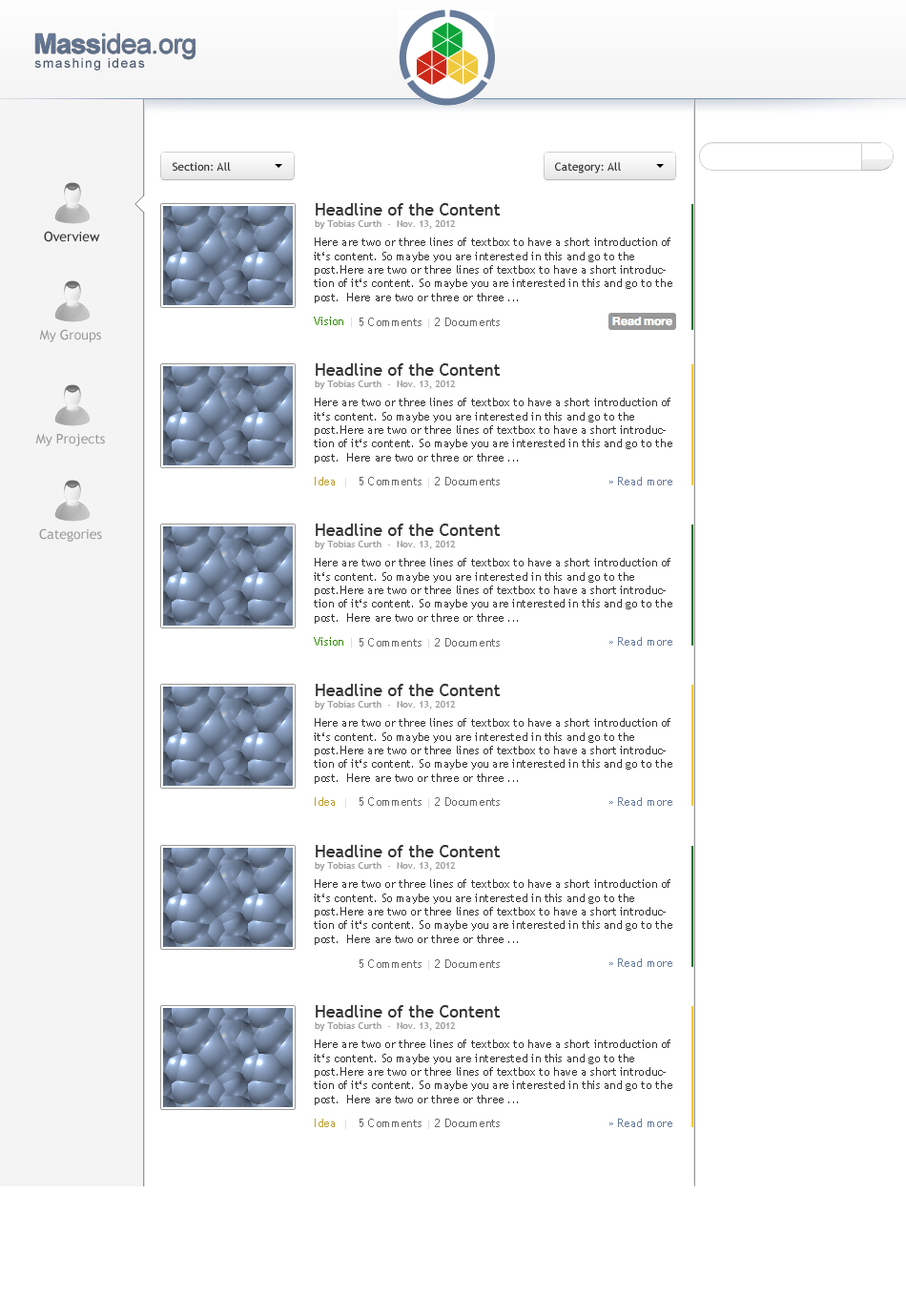
<style>
.page{position:relative;width:906px;height:1316px;background:#ffffff}
.page>*{position:absolute;margin:0}
.t1{font:27.7px "ArialMT";letter-spacing:-0.02em;color:#61738e}
.t2{font:27.7px "Arial-BoldMT";letter-spacing:-0.02em;color:#61738e}
.t3{font:13.4px "ArialMT";letter-spacing:0.1em;color:#455369}
.t4{font:11.4px "TrebuchetMS";color:#333333}
.t5{font:9.5px "TrebuchetMS";color:#999999}
.t6{font:17.2px "TrebuchetMS";color:#333333}
.t7{font:13.4px "TrebuchetMS";color:#333333}
.t8{font:11.4px "TrebuchetMS";color:#2c8d00}
.t9{font:11.4px "TrebuchetMS";color:#dddddd}
.t10{font:11.4px "TrebuchetMS";color:#666666}
.t11{font:13.4px "TrebuchetMS";color:#999999}
.t12{font:11.4px "TrebuchetMS";color:#bd9e2f}
.t13{font:11.4px "TrebuchetMS";color:#677c9c}
</style>
<div class="page">
<p class="t1" style="left:35px;top:33px;width:161px;height:26px"><span class="t2">Mass</span>idea.org</p>
<p class="t3" style="left:34px;top:58px;width:111px;height:13px">smashing ideas</p>
<p class="t4" style="left:173px;top:162px;width:58px;height:9px">Section: All</p>
<p class="t4" style="left:555px;top:162px;width:66px;height:12px">Category: All</p>
<p class="t5" style="left:315px;top:203px;width:186px;height:26px"><span class="t6">Headline of the Content<br></span>by Tobias Curth  ·  Nov. 13, 2012</p>
<p class="t7" style="left:44px;top:231px;width:56px;height:11px">Overview</p>
<p class="t4" style="left:314px;top:237px;width:358px;height:66px">Here are two or three lines of textbox to have a short introduction of it‘s content. So maybe you are interested in this and go to the post.Here are two or three lines of textbox to have a short introduction of it‘s content. So maybe you are interested in this and go to the post.  Here are two or three or three ...</p>
<p class="t8" style="left:314px;top:317px;width:38px;height:10px">Vision <span class="t9">|</span></p>
<p class="t10" style="left:360px;top:318px;width:62px;height:8px">5 Comments</p>
<p class="t10" style="left:428px;top:318px;width:72px;height:10px"><span class="t9">| </span>2 Documents</p>
<p class="t11" style="left:39px;top:329px;width:62px;height:13px">My Groups</p>
<p class="t5" style="left:315px;top:363px;width:186px;height:26px"><span class="t6">Headline of the Content<br></span>by Tobias Curth  ·  Nov. 13, 2012</p>
<p class="t4" style="left:314px;top:398px;width:358px;height:66px">Here are two or three lines of textbox to have a short introduction of it‘s content. So maybe you are interested in this and go to the post.Here are two or three lines of textbox to have a short introduction of it‘s content. So maybe you are interested in this and go to the post.  Here are two or three or three ...</p>
<p class="t11" style="left:35px;top:434px;width:70px;height:12px">My Projects</p>
<p class="t12" style="left:315px;top:477px;width:31px;height:10px">Idea  <span class="t9">|</span></p>
<p class="t10" style="left:360px;top:477px;width:62px;height:8px">5 Comments</p>
<p class="t10" style="left:428px;top:477px;width:72px;height:10px"><span class="t9">| </span>2 Documents</p>
<p class="t13" style="left:609px;top:477px;width:63px;height:8px">» Read more</p>
<p class="t11" style="left:39px;top:528px;width:63px;height:14px">Categories</p>
<p class="t5" style="left:315px;top:524px;width:186px;height:25px"><span class="t6">Headline of the Content<br></span>by Tobias Curth  ·  Nov. 13, 2012</p>
<p class="t4" style="left:314px;top:558px;width:358px;height:66px">Here are two or three lines of textbox to have a short introduction of it‘s content. So maybe you are interested in this and go to the post.Here are two or three lines of textbox to have a short introduction of it‘s content. So maybe you are interested in this and go to the post.  Here are two or three or three ...</p>
<p class="t8" style="left:314px;top:637px;width:38px;height:11px">Vision <span class="t9">|</span></p>
<p class="t10" style="left:360px;top:638px;width:62px;height:9px">5 Comments</p>
<p class="t10" style="left:428px;top:638px;width:72px;height:11px"><span class="t9">| </span>2 Documents</p>
<p class="t13" style="left:609px;top:637px;width:63px;height:9px">» Read more</p>
<p class="t5" style="left:315px;top:684px;width:186px;height:26px"><span class="t6">Headline of the Content<br></span>by Tobias Curth  ·  Nov. 13, 2012</p>
<p class="t4" style="left:314px;top:718px;width:358px;height:66px">Here are two or three lines of textbox to have a short introduction of it‘s content. So maybe you are interested in this and go to the post.Here are two or three lines of textbox to have a short introduction of it‘s content. So maybe you are interested in this and go to the post.  Here are two or three or three ...</p>
<p class="t12" style="left:315px;top:797px;width:31px;height:11px">Idea  <span class="t9">|</span></p>
<p class="t10" style="left:360px;top:797px;width:62px;height:9px">5 Comments</p>
<p class="t10" style="left:428px;top:797px;width:72px;height:11px"><span class="t9">| </span>2 Documents</p>
<p class="t13" style="left:609px;top:797px;width:63px;height:9px">» Read more</p>
<p class="t5" style="left:315px;top:845px;width:186px;height:26px"><span class="t6">Headline of the Content<br></span>by Tobias Curth  ·  Nov. 13, 2012</p>
<p class="t4" style="left:314px;top:879px;width:358px;height:66px">Here are two or three lines of textbox to have a short introduction of it‘s content. So maybe you are interested in this and go to the post.Here are two or three lines of textbox to have a short introduction of it‘s content. So maybe you are interested in this and go to the post.  Here are two or three or three ...</p>
<p class="t10" style="left:360px;top:959px;width:62px;height:9px">5 Comments</p>
<p class="t10" style="left:428px;top:959px;width:72px;height:11px"><span class="t9">| </span>2 Documents</p>
<p class="t13" style="left:609px;top:958px;width:63px;height:9px">» Read more</p>
<p class="t5" style="left:315px;top:1005px;width:186px;height:26px"><span class="t6">Headline of the Content<br></span>by Tobias Curth  ·  Nov. 13, 2012</p>
<p class="t4" style="left:314px;top:1040px;width:358px;height:65px">Here are two or three lines of textbox to have a short introduction of it‘s content. So maybe you are interested in this and go to the post.Here are two or three lines of textbox to have a short introduction of it‘s content. So maybe you are interested in this and go to the post.  Here are two or three or three ...</p>
<p class="t12" style="left:315px;top:1119px;width:31px;height:10px">Idea  <span class="t9">|</span></p>
<p class="t10" style="left:360px;top:1119px;width:62px;height:8px">5 Comments</p>
<p class="t10" style="left:428px;top:1119px;width:72px;height:10px"><span class="t9">| </span>2 Documents</p>
<p class="t13" style="left:609px;top:1119px;width:63px;height:8px">» Read more</p>
</div>
